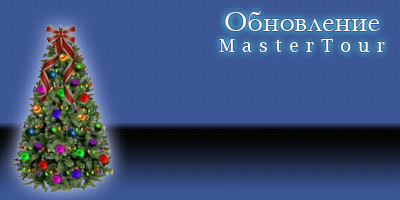
<style>
.page{position:relative;width:400px;height:200px}
.page>*{position:absolute;margin:0}
.t1{font:30px "Garamond";color:#ffffff}
.t2{font:18px "LucidaBright";letter-spacing:0.4em;color:#ffffff}
</style>
<div class="page">
<p class="t1" style="left:219px;top:11px;width:166px;height:41px;text-align:center">Обновление<br><span class="t2">MasterTour</span></p>
</div>
